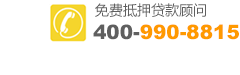
<style>
.page{position:relative;width:240px;height:75px;background:#ffffff}
.page>*{position:absolute;margin:0}
.t1{font:14px "MicrosoftYaHei";color:#5f5f5f}
.t2{font:20px "Arial-Black";color:#ff9900}
.t3{font:20px "Arial-Black";color:#5f5f5f}
</style>
<div class="page">
<p class="t1" style="left:95px;top:3px;width:111px;height:14px">免费抵押贷款顾问</p>
<p class="t2" style="left:93px;top:24px;width:146px;height:16px"><span class="t3">400-</span>990-8815</p>
</div>
